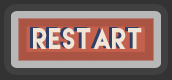
<style>
.page{position:relative;width:172px;height:80px;background:#404040}
.page>*{position:absolute;margin:0}
.t1{font:26.6px "LemonMilk";letter-spacing:0.05em;color:#f2e5d6;scale:0.9 1}
</style>
<div class="page">
<p class="t1" style="left:33px;top:28px;width:109px;height:21px">Restart</p>
</div>
